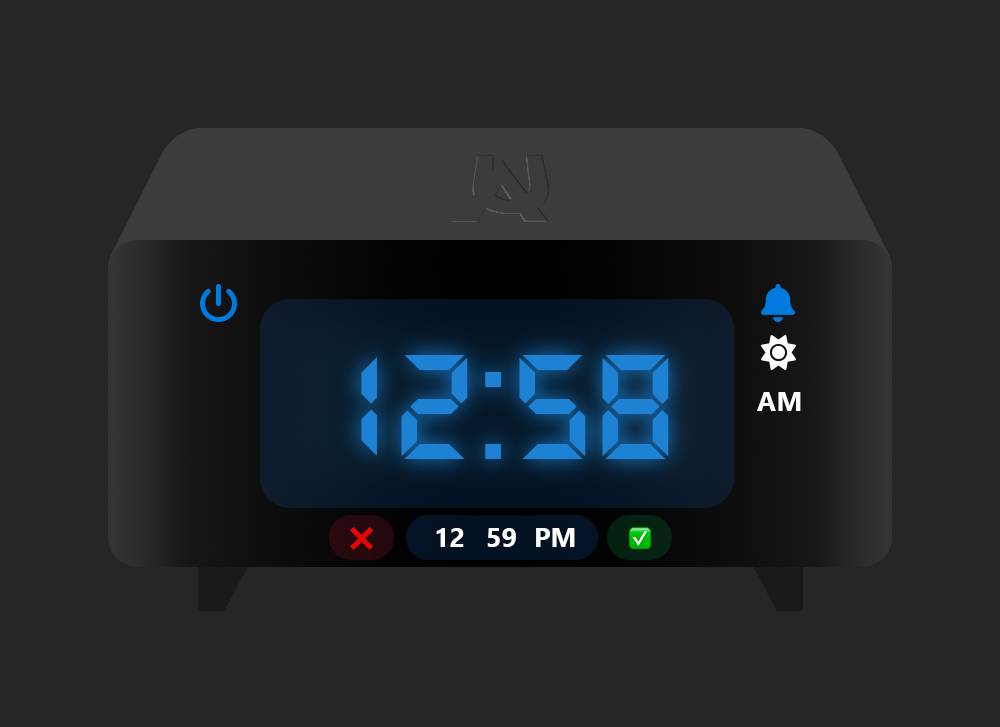
<style>
.page{position:relative;width:1000px;height:727px;background:#262626}
.page>*{position:absolute;margin:0}
.t1{font:162.8px "DS-Digital-Bold";color:#1d81d4}
.t2{font:27.3px "SegoeUI-Bold";color:#ffffff}
</style>
<div class="page">
<p class="t1" style="left:361px;top:355px;width:308px;height:104px">12:58</p>
<p class="t2" style="left:757px;top:392px;width:44px;height:19px">AM</p>
<p class="t2" style="left:436px;top:528px;width:28px;height:19px">12</p>
<p class="t2" style="left:487px;top:528px;width:29px;height:19px">59</p>
<p class="t2" style="left:536px;top:528px;width:39px;height:19px">PM</p>
</div>
